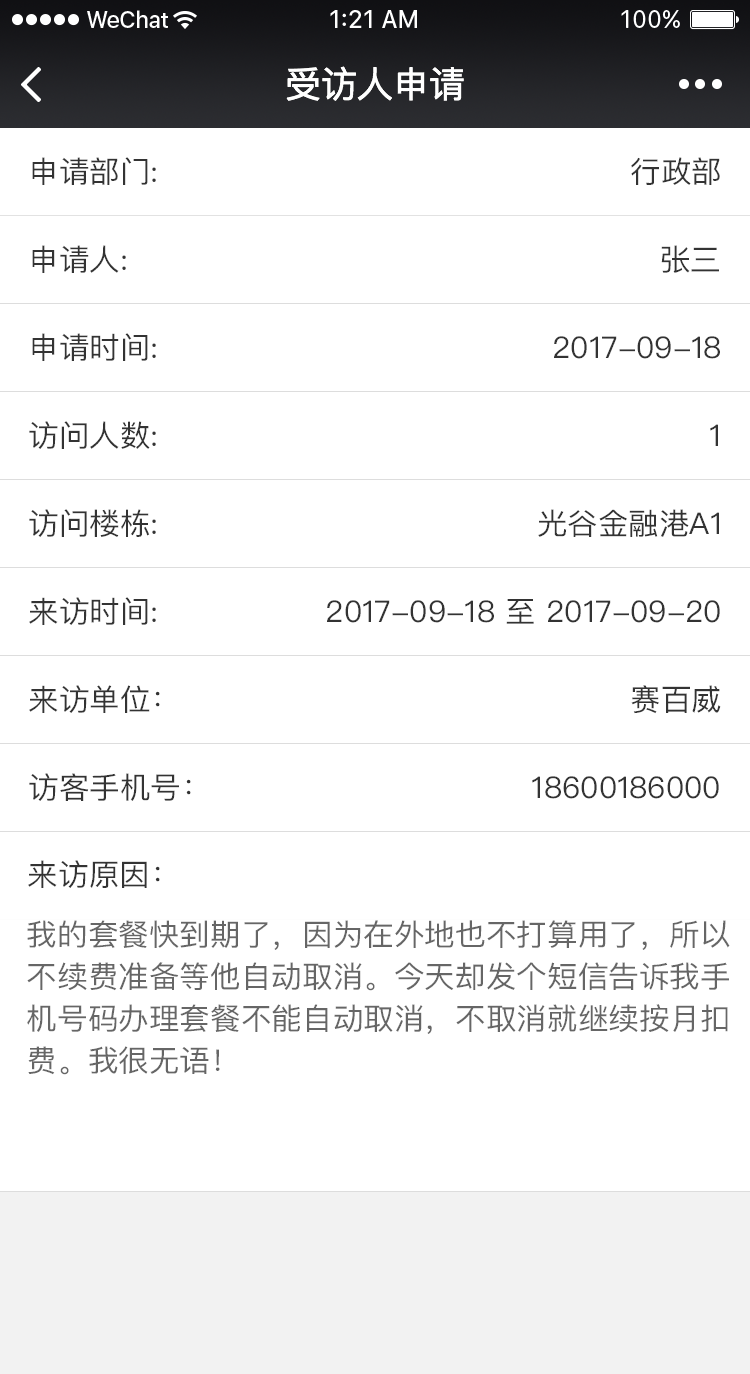
<style>
.page{position:relative;width:750px;height:1374px;background:#ffffff}
.page>*{position:absolute;margin:0}
.t1{font:36px "PingFangSC-Regular";color:#ffffff}
.t2{font:30px "PingFangSC-Regular";color:#333333}
.t3{font:30px/42px "PingFangSC-Regular";color:#666666}
</style>
<div class="page">
<p class="t1" style="left:286px;top:66px;width:178px;height:35px">受访人申请</p>
<p class="t2" style="left:32px;top:157px;width:124px;height:28px">申请部门:</p>
<p class="t2" style="left:631px;top:157px;width:89px;height:28px">行政部</p>
<p class="t2" style="left:32px;top:245px;width:94px;height:28px">申请人:</p>
<p class="t2" style="left:661px;top:245px;width:58px;height:28px">张三</p>
<p class="t2" style="left:32px;top:333px;width:124px;height:28px">申请时间:</p>
<p class="t2" style="left:554px;top:336px;width:166px;height:23px">2017-09-18</p>
<p class="t2" style="left:29px;top:421px;width:127px;height:28px">访问人数:</p>
<p class="t2" style="left:710px;top:424px;width:8px;height:22px">1</p>
<p class="t2" style="left:29px;top:509px;width:127px;height:28px">访问楼栋:</p>
<p class="t2" style="left:538px;top:509px;width:181px;height:28px">光谷金融港A1</p>
<p class="t2" style="left:29px;top:597px;width:127px;height:28px">来访时间:</p>
<p class="t2" style="left:327px;top:599px;width:393px;height:25px">2017-09-18 至 2017-09-20</p>
<p class="t2" style="left:29px;top:685px;width:131px;height:28px">来访单位：</p>
<p class="t2" style="left:631px;top:685px;width:90px;height:29px">赛百威</p>
<p class="t2" style="left:29px;top:773px;width:162px;height:28px">访客手机号：</p>
<p class="t2" style="left:532px;top:776px;width:187px;height:23px">18600186000</p>
<p class="t2" style="left:28px;top:860px;width:132px;height:28px">来访原因：</p>
<p class="t3" style="left:27px;top:920px;width:703px;height:155px">我的套餐快到期了，因为在外地也不打算用了，所以<br>不续费准备等他自动取消。今天却发个短信告诉我手<br>机号码办理套餐不能自动取消，不取消就继续按月扣<br>费。我很无语！</p>
</div>
